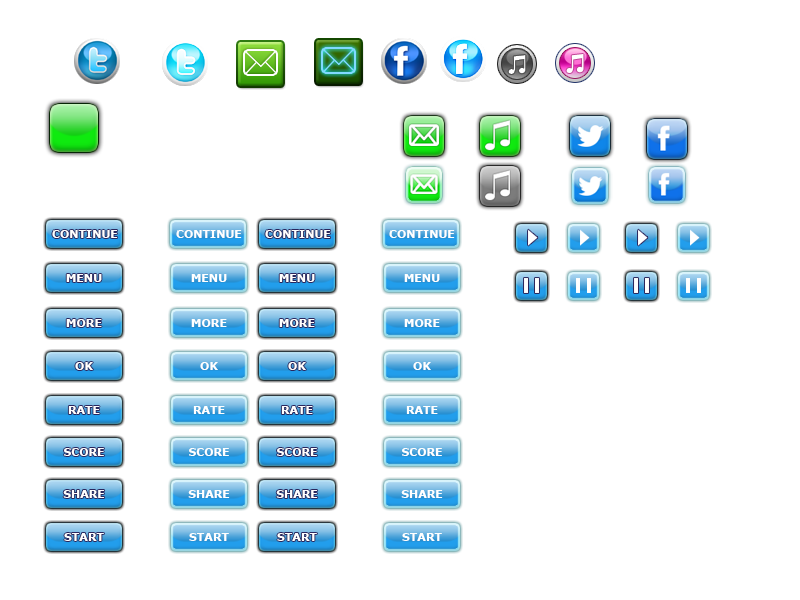
<style>
.page{position:relative;width:800px;height:600px;background:#ffffff}
.page>*{position:absolute;margin:0}
.t1{font:11px "Verdana-Bold";color:#ffffff}
</style>
<div class="page">
<p class="t1" style="left:52px;top:230px;width:66px;height:8px">CONTINUE</p>
<p class="t1" style="left:176px;top:230px;width:66px;height:8px">CONTINUE</p>
<p class="t1" style="left:66px;top:274px;width:36px;height:8px">MENU</p>
<p class="t1" style="left:191px;top:274px;width:36px;height:8px">MENU</p>
<p class="t1" style="left:66px;top:319px;width:36px;height:8px">MORE</p>
<p class="t1" style="left:191px;top:319px;width:36px;height:8px">MORE</p>
<p class="t1" style="left:75px;top:362px;width:18px;height:8px">OK</p>
<p class="t1" style="left:200px;top:362px;width:18px;height:8px">OK</p>
<p class="t1" style="left:68px;top:406px;width:32px;height:8px">RATE</p>
<p class="t1" style="left:193px;top:406px;width:32px;height:8px">RATE</p>
<p class="t1" style="left:64px;top:448px;width:40px;height:8px">SCORE</p>
<p class="t1" style="left:189px;top:448px;width:40px;height:8px">SCORE</p>
<p class="t1" style="left:63px;top:490px;width:42px;height:8px">SHARE</p>
<p class="t1" style="left:188px;top:490px;width:42px;height:8px">SHARE</p>
<p class="t1" style="left:64px;top:533px;width:40px;height:8px">START</p>
<p class="t1" style="left:189px;top:533px;width:40px;height:8px">START</p>
</div>
